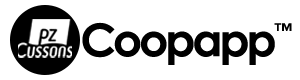
<style>
.page{position:relative;width:300px;height:80px;background:#ffffff}
.page>*{position:absolute;margin:0}
.t1{font:45.1px "CenturyGothic-Bold";letter-spacing:-0.065em;color:#000000}
.t2{font:18.8px "CenturyGothic-Bold";letter-spacing:-0.065em;color:#000000}
</style>
<div class="page">
<p class="t1" style="left:82px;top:22px;width:193px;height:43px">Coopapp</p>
<p class="t2" style="left:274px;top:23px;width:18px;height:8px">™</p>
</div>
